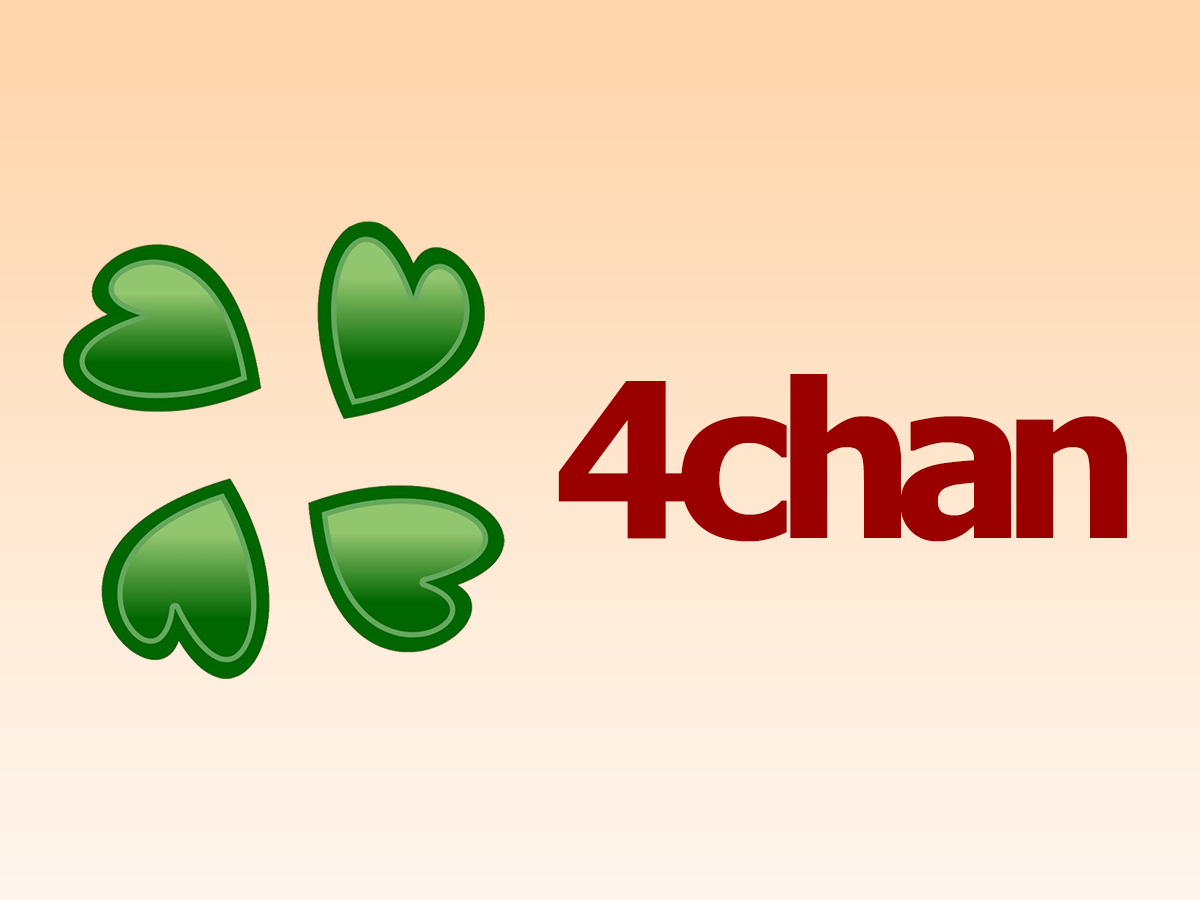
<style>
.page{position:relative;width:1200px;height:900px}
.page>*{position:absolute;margin:0}
.t1{font:216px "Tahoma-Bold";letter-spacing:-0.05em;color:#9a0000}
.t2{font:216px "Tahoma-Bold";letter-spacing:-0.08em;color:#9a0000}
.t3{font:216px "Tahoma-Bold";letter-spacing:-0.062em;color:#9a0000}
.t4{font:216px "Tahoma-Bold";letter-spacing:-0.1em;color:#9a0000}
</style>
<div class="page">
<p class="t1" style="left:558px;top:374px;width:569px;height:168px"><span class="t2">4</span><span class="t3">c</span>ha<span class="t4">n</span></p>
</div>
